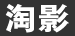
<style>
.page{position:relative;width:75px;height:36px;background:#333333}
.page>*{position:absolute;margin:0}
.t1{font:31.5px "FZYDCHJW--GB1-0";letter-spacing:0.24em;color:#ffffff}
</style>
<div class="page">
<p class="t1" style="left:5px;top:4px;width:64px;height:29px">淘影</p>
</div>
